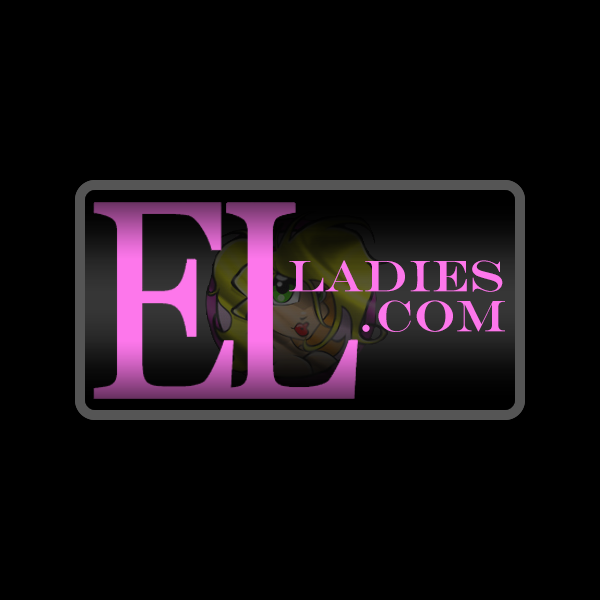
<style>
.page{position:relative;width:600px;height:600px;background:#000000}
.page>*{position:absolute;margin:0}
.t1{font:44.2px "EngraversMT";letter-spacing:0.005em;color:#fd77eb}
</style>
<div class="page">
<p class="t1" style="left:289px;top:260px;width:214px;height:32px">Ladies</p>
<p class="t1" style="left:362px;top:300px;width:143px;height:32px">.com</p>
</div>
